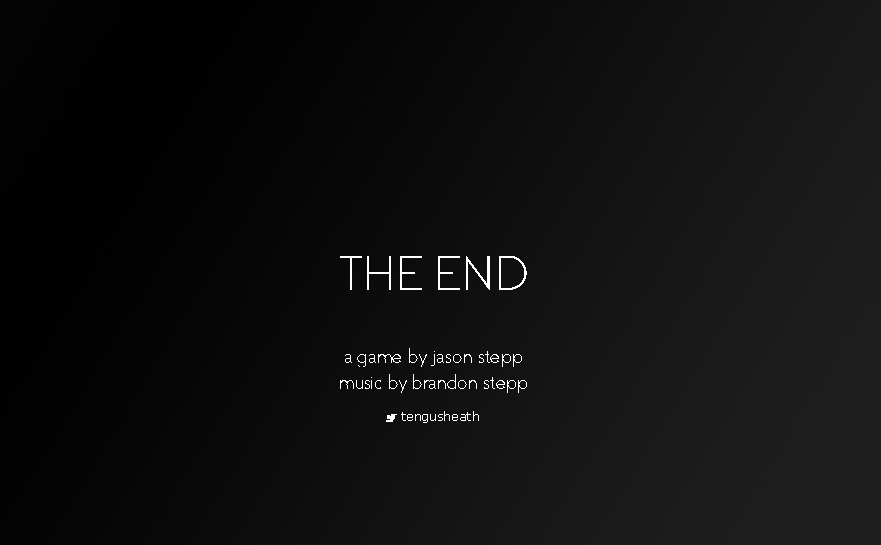
<style>
.page{position:relative;width:881px;height:545px}
.page>*{position:absolute;margin:0}
.t1{font:48.9px "Coves-Light";color:#ffffff}
.t2{font:21.2px "Coves-Light";color:#ffffff}
.t3{font:12.1px "Verdana";color:#ffffff}
</style>
<div class="page">
<p class="t1" style="left:340px;top:256px;width:187px;height:34px">THE END</p>
<p class="t2" style="left:340px;top:348px;width:187px;height:45px;text-align:center">a game by jason stepp<br>music by brandon stepp</p>
<p class="t3" style="left:401px;top:411px;width:78px;height:12px">tengusheath</p>
</div>
